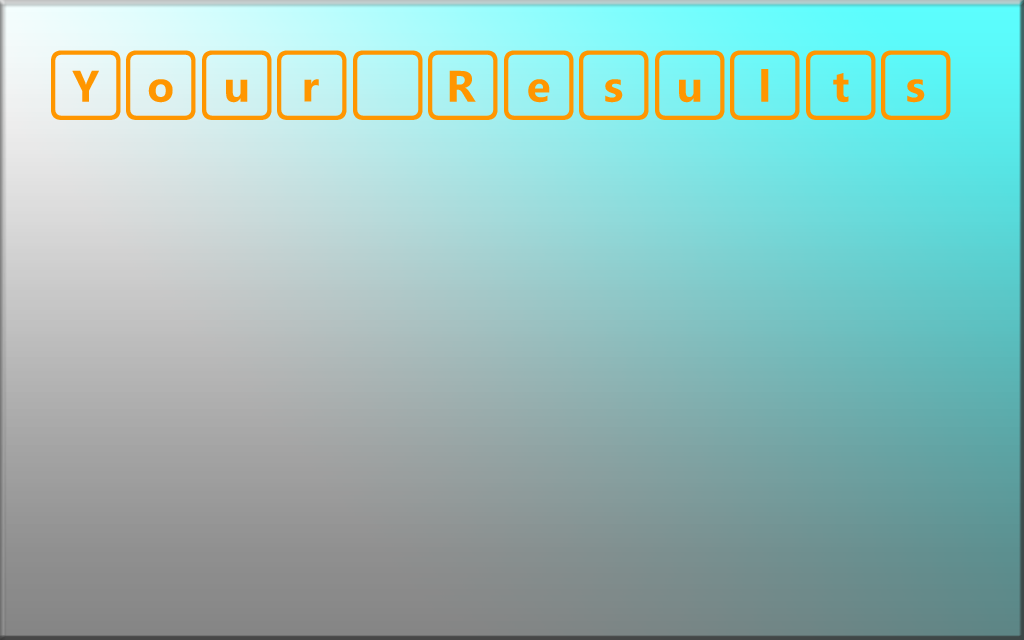
<style>
.page{position:relative;width:1024px;height:640px}
.page>*{position:absolute;margin:0}
.t1{font:60px "SegoeKeycaps";color:#ff9600}
</style>
<div class="page">
<p class="t1" style="left:51px;top:50px;width:900px;height:70px">Your Results</p>
</div>
